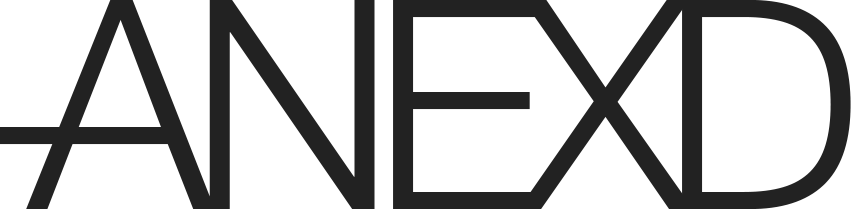
<style>
.page{position:relative;width:851px;height:209px;background:#ffffff}
.page>*{position:absolute;margin:0}
.t1{font:293.2px "HelveticaNeue-Light";letter-spacing:-0.08em;color:#222222}
.t2{font:293.2px "HelveticaNeue-Light";letter-spacing:-0.1em;color:#222222}
.t3{font:293.2px "HelveticaNeue-Light";color:#222222}
</style>
<div class="page">
<p class="t1" style="left:26px;top:0px;width:825px;height:209px">ANE<span class="t2">X</span><span class="t3">D</span></p>
</div>
